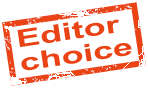
<style>
.page{position:relative;width:148px;height:88px;background:#ffffff}
.page>*{position:absolute;margin:0}
.t1{font:24px/24px "Arial-BoldMT";color:#ea4416;scale:1.5 1}
</style>
<div class="page">
<p class="t1" style="left:14px;top:10px;width:121px;height:70px;rotate:-9deg">Editor<br>choice</p>
</div>
